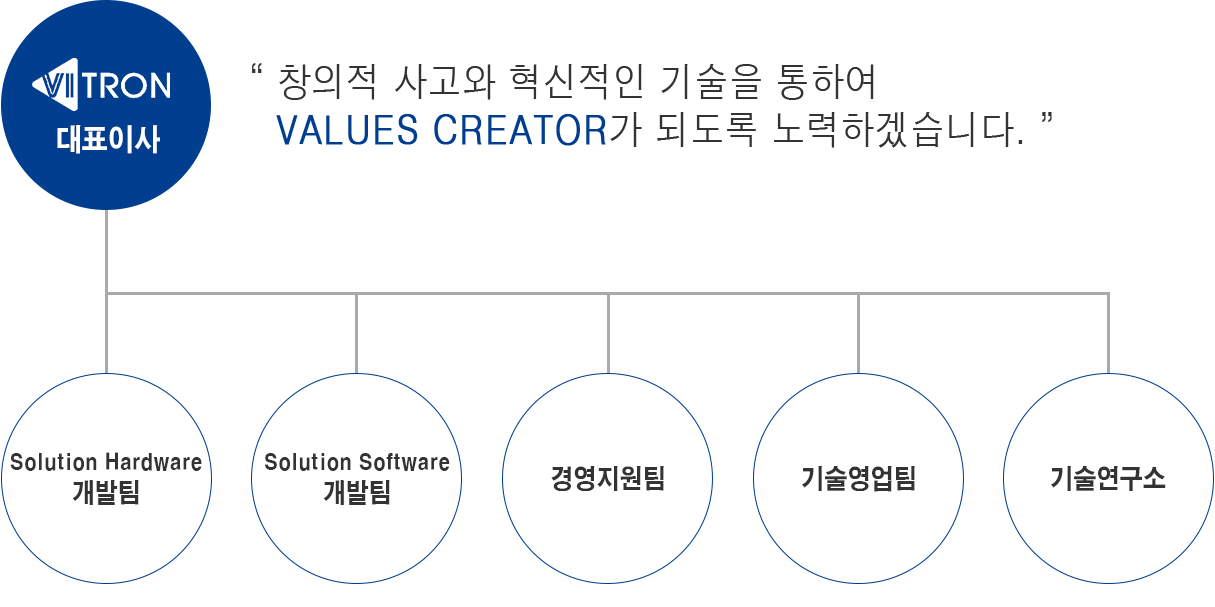
<style>
.page{position:relative;width:1215px;height:607px;background:#ffffff}
.page>*{position:absolute;margin:0}
.t1{font:40px "H2gtrM";color:#333333;scale:0.87 1}
.t2{font:40px "H2gtrM";color:#013e8f;font-weight:bold;scale:0.87 1}
.t3{font:30px "H2gtrE";color:#ffffff;scale:0.88 1}
.t4{font:22.2px "H2gtrE";color:#333333;scale:0.87 1}
.t5{font:26.7px "H2gtrE";color:#333333;scale:0.87 1}
</style>
<div class="page">
<p class="t1" style="left:252px;top:63px;width:800px;height:85px">“ 창의적 사고와 혁신적인 기술을 통하여<br>    <span class="t2">VALUES CREATOR</span>가 되도록 노력하겠습니다. ”</p>
<p class="t3" style="left:57px;top:125px;width:103px;height:29px">대표이사</p>
<p class="t4" style="left:10px;top:452px;width:192px;height:53px;text-align:center">Solution Hardware<br><span class="t5">개발팀</span></p>
<p class="t4" style="left:265px;top:453px;width:185px;height:52px;text-align:center">Solution Software<br><span class="t5">개발팀</span></p>
<p class="t5" style="left:551px;top:466px;width:113px;height:25px">경영지원팀</p>
<p class="t5" style="left:802px;top:466px;width:113px;height:26px">기술영업팀</p>
<p class="t5" style="left:1051px;top:466px;width:115px;height:25px">기술연구소</p>
</div>
